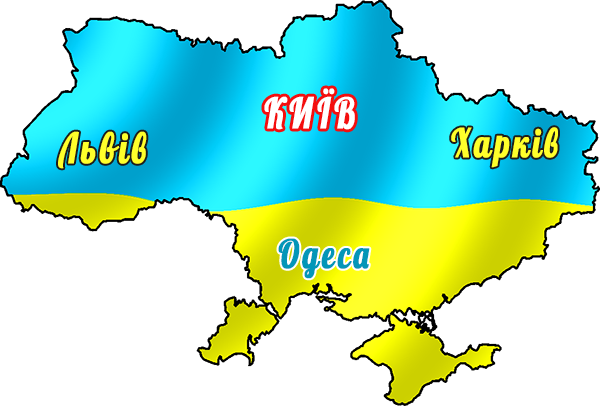
<style>
.page{position:relative;width:600px;height:406px;background:#ffffff}
.page>*{position:absolute;margin:0}
.t1{font:41.8px "Lobster";letter-spacing:0.1em;color:#ffffff;font-weight:bold;scale:0.78 1}
.t2{font:41.8px "Lobster";letter-spacing:0.1em;color:#ffff2b;font-weight:bold;scale:0.78 1}
.t3{font:39.5px "Lobster";letter-spacing:0.1em;color:#ffff2b;font-weight:bold;scale:0.78 1}
.t4{font:39.5px "Lobster";letter-spacing:0.1em;color:#0396b8;font-weight:bold;scale:0.78 1}
</style>
<div class="page">
<p class="t1" style="left:264px;top:88px;width:91px;height:42px">КИЇВ</p>
<p class="t2" style="left:58px;top:131px;width:89px;height:38px">Львів</p>
<p class="t3" style="left:451px;top:127px;width:107px;height:41px">Харків</p>
<p class="t4" style="left:278px;top:238px;width:92px;height:41px">Одеса</p>
</div>
